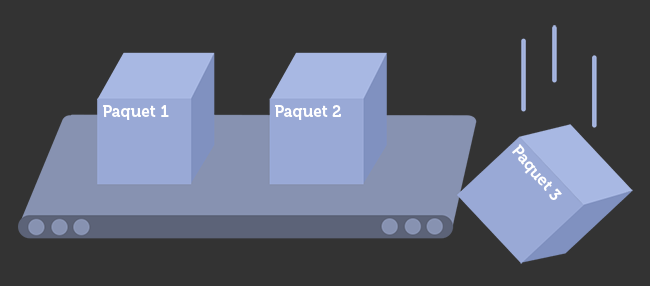
<style>
.page{position:relative;width:650px;height:286px;background:#333333}
.page>*{position:absolute;margin:0}
.t1{font:16px "Museo-700";color:#ffffff}
</style>
<div class="page">
<p class="t1" style="left:103px;top:105px;width:66px;height:15px">Paquet 1</p>
<p class="t1" style="left:275px;top:105px;width:66px;height:15px">Paquet 2</p>
<p class="t1" style="left:512px;top:144px;width:50px;height:56px;rotate:50deg">Paquet 3</p>
</div>
